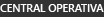
<style>
.page{position:relative;width:104px;height:17px;background:#333333}
.page>*{position:absolute;margin:0}
.t1{font:10.7px "SegoeUI-Semibold";color:#fefefe}
</style>
<div class="page">
<p class="t1" style="left:0px;top:4px;width:104px;height:8px">CENTRAL OPERATIVA</p>
</div>
